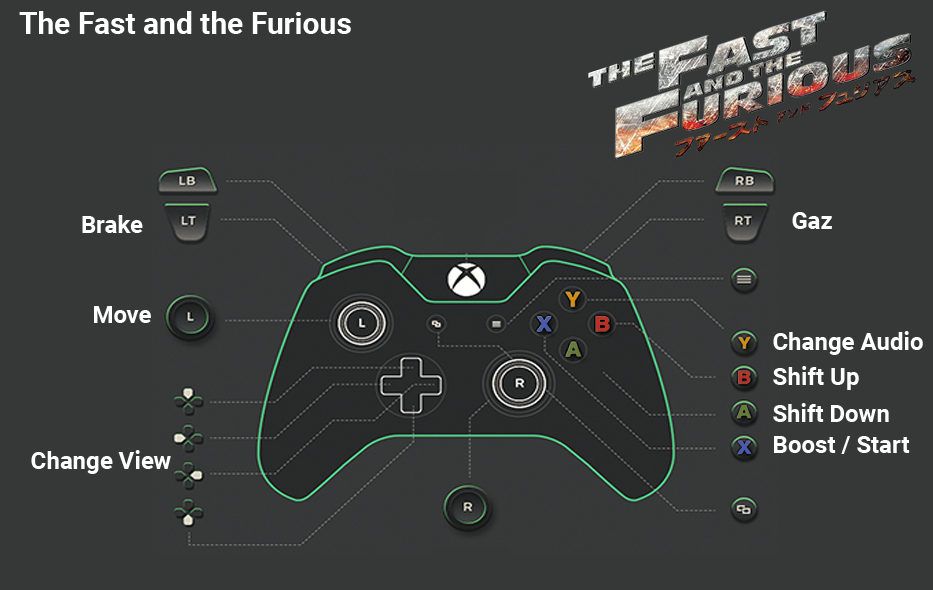
<style>
.page{position:relative;width:933px;height:590px;background:#363838}
.page>*{position:absolute;margin:0}
.t1{font:30px "Roboto-Bold";color:#ffffff}
.t2{font:24px "Roboto-Bold";color:#ffffff}
</style>
<div class="page">
<p class="t1" style="left:19px;top:11px;width:332px;height:23px">The Fast and the Furious</p>
<p class="t2" style="left:82px;top:215px;width:61px;height:18px">Brake</p>
<p class="t2" style="left:792px;top:212px;width:40px;height:17px">Gaz</p>
<p class="t2" style="left:94px;top:306px;width:57px;height:17px">Move</p>
<p class="t2" style="left:773px;top:331px;width:150px;height:24px">Change Audio</p>
<p class="t2" style="left:773px;top:366px;width:86px;height:24px">Shift Up</p>
<p class="t2" style="left:773px;top:403px;width:116px;height:19px">Shift Down</p>
<p class="t2" style="left:774px;top:436px;width:136px;height:18px">Boost / Start</p>
<p class="t2" style="left:31px;top:450px;width:140px;height:24px">Change View</p>
</div>
